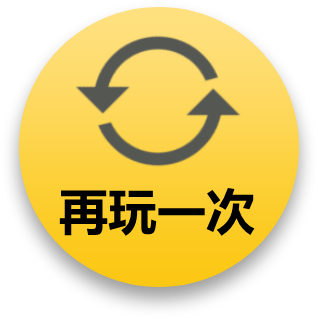
<style>
.page{position:relative;width:318px;height:318px;background:#ffffff}
.page>*{position:absolute;margin:0}
.t1{font:49px "MicrosoftYaHei-Bold";color:#000000}
</style>
<div class="page">
<p class="t1" style="left:59px;top:188px;width:196px;height:48px">再玩一次</p>
</div>
